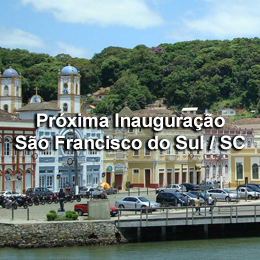
<style>
.page{position:relative;width:260px;height:260px}
.page>*{position:absolute;margin:0}
.t1{font:18.5px "Arial-BoldMT";color:#ffffff}
</style>
<div class="page">
<p class="t1" style="left:15px;top:113px;width:230px;height:37px;text-align:center">Próxima Inauguração<br>São Francisco do Sul / SC</p>
</div>
